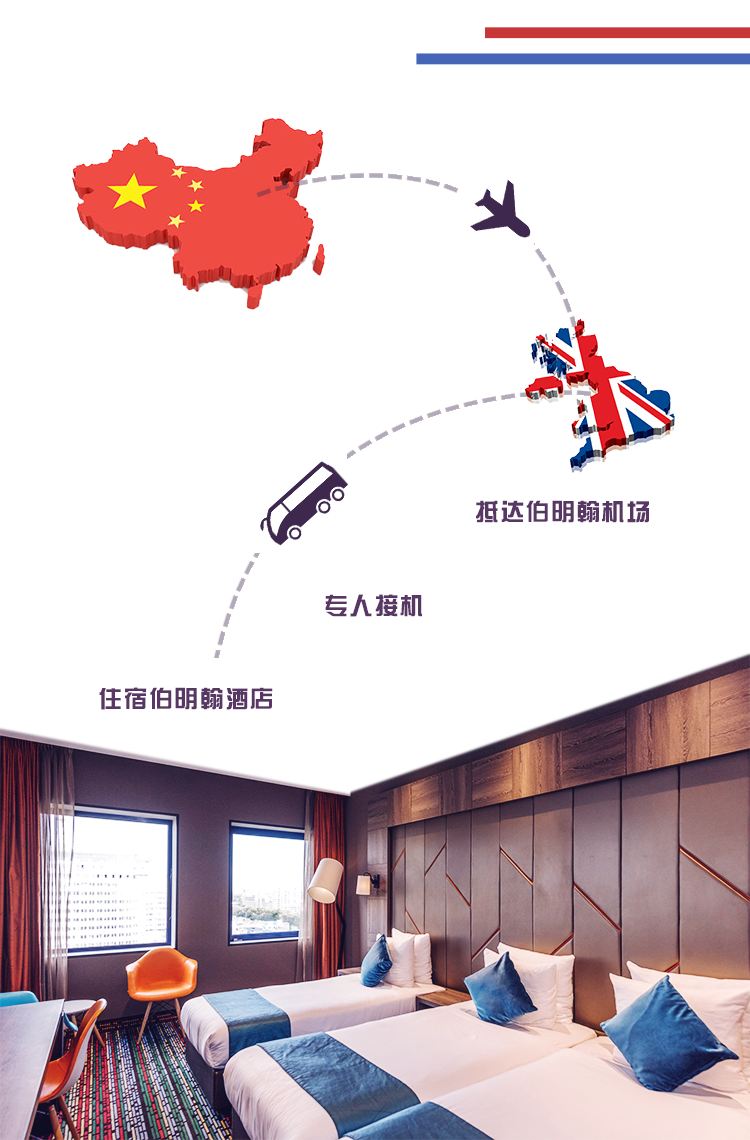
<style>
.page{position:relative;width:750px;height:1140px;background:#ffffff}
.page>*{position:absolute;margin:0}
.t1{font:24px "FZZYJW--GB1-0";letter-spacing:0.05em;color:#593764}
</style>
<div class="page">
<p class="t1" style="left:476px;top:500px;width:173px;height:23px">抵达伯明翰机场</p>
<p class="t1" style="left:325px;top:594px;width:97px;height:23px">专人接机</p>
<p class="t1" style="left:99px;top:687px;width:174px;height:23px">住宿伯明翰酒店</p>
</div>
